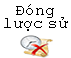
<style>
.page{position:relative;width:71px;height:58px;background:#ffffff}
.page>*{position:absolute;margin:0}
.t1{font:16px/13.3px "CourierNewPSMT";color:#000000}
</style>
<div class="page">
<p class="t1" style="left:4px;top:4px;width:64px;height:27px;text-align:center">Đóng<br>lược sử</p>
</div>
